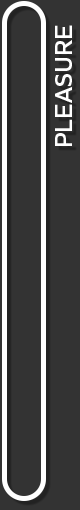
<style>
.page{position:relative;width:80px;height:510px;background:#333333}
.page>*{position:absolute;margin:0}
.t1{font:25px "QuietSans-SemiBold";color:#ffffff}
</style>
<div class="page">
<p class="t1" style="left:55px;top:25px;width:17px;height:121px;rotate:-90deg">PLEASURE</p>
</div>
